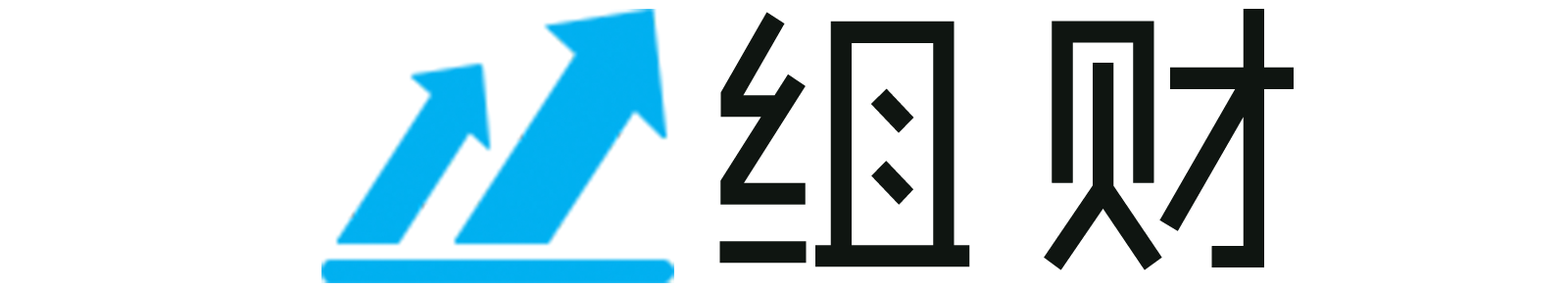
<style>
.page{position:relative;width:1568px;height:290px;background:#ffffff}
.page>*{position:absolute;margin:0}
.t1{font:293.3px "MFShangHei_Noncommercial-Regular";letter-spacing:0.12em;color:#0f1511;font-weight:bold;scale:0.96 1}
</style>
<div class="page">
<p class="t1" style="left:719px;top:9px;width:575px;height:261px">组财</p>
</div>
